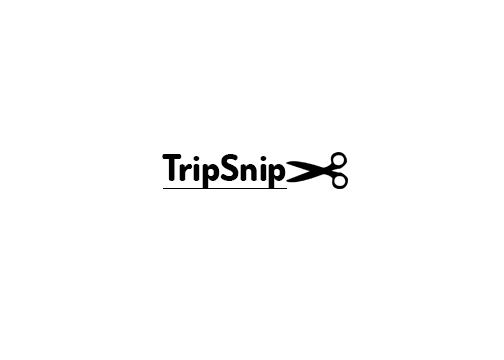
<style>
.page{position:relative;width:504px;height:360px;background:#ffffff}
.page>*{position:absolute;margin:0}
.t1{font:36px "Dosis-ExtraBold";color:#020202}
</style>
<div class="page">
<p class="t1" style="left:162px;top:154px;width:124px;height:35px">TripSnip</p>
</div>
